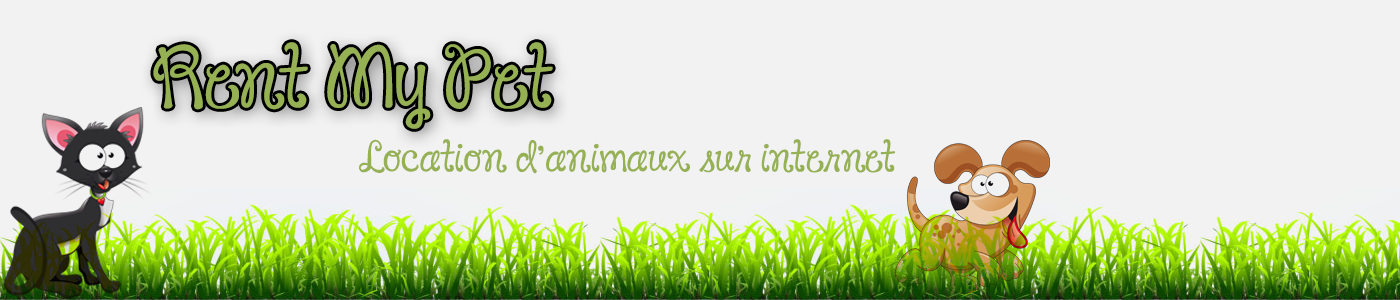
<style>
.page{position:relative;width:1400px;height:300px;background:#f2f2f2}
.page>*{position:absolute;margin:0}
.t1{font:60px "JandaHappyDay";color:#96b054}
.t2{font:30px "JandaHappyDay";color:#96b054}
</style>
<div class="page">
<p class="t1" style="left:153px;top:42px;width:400px;height:87px">Rent My Pet</p>
<p class="t2" style="left:359px;top:139px;width:536px;height:35px">Location d’animaux sur internet</p>
</div>
